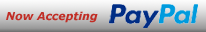
<style>
.page{position:relative;width:206px;height:32px}
.page>*{position:absolute;margin:0}
.t1{font:11px "Verdana-BoldItalic";color:#c12d25}
</style>
<div class="page">
<p class="t1" style="left:6px;top:11px;width:92px;height:12px">Now Accepting</p>
</div>
